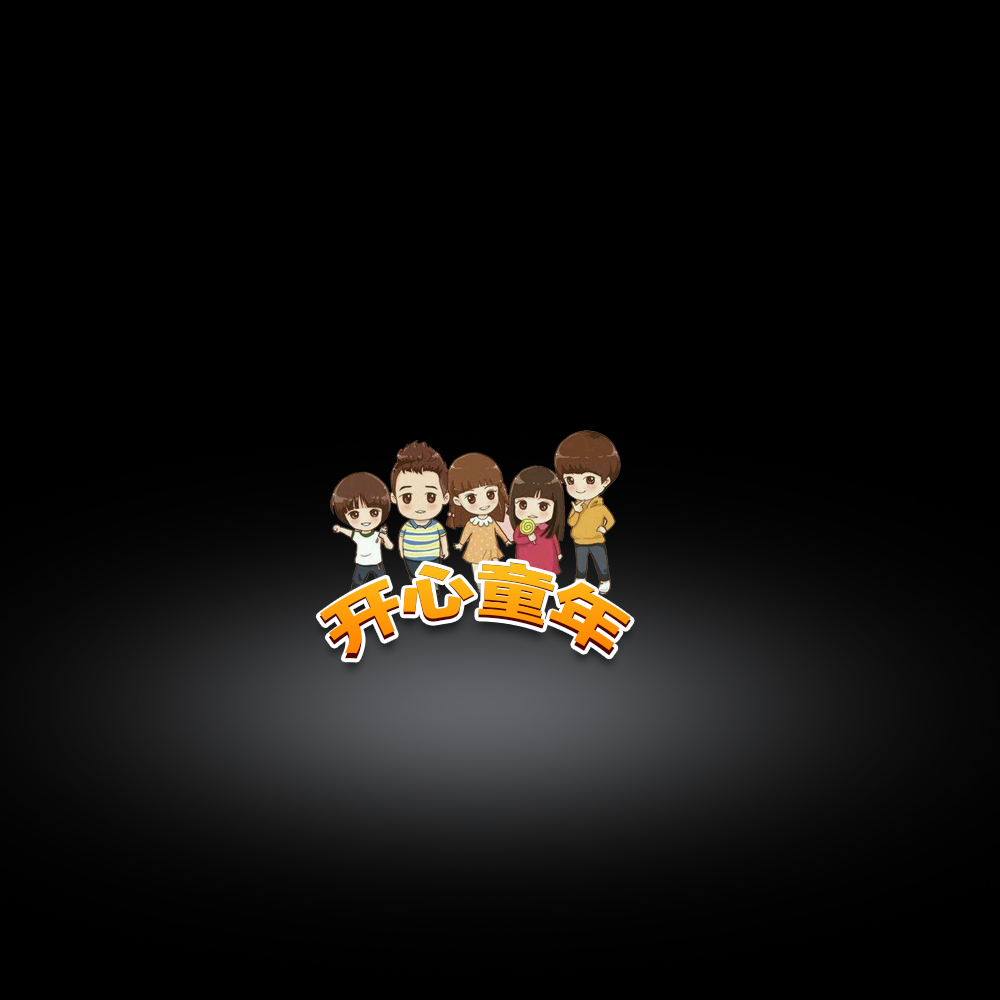
<style>
.page{position:relative;width:1000px;height:1000px;background:#000000}
.page>*{position:absolute;margin:0}
.t1{font:63.9px "FZLTTHK--GBK1-0";text-transform:uppercase;scale:0.94 1}
.t2{font:60px "FZLTTHK--GBK1-0";color:#fda40e;text-transform:uppercase}
</style>
<div class="page">
<p class="t1" style="left:319px;top:562px;width:312px;height:97px">开心童年</p>
<p class="t2" style="left:319px;top:562px;width:312px;height:92px">开心童年</p>
</div>
